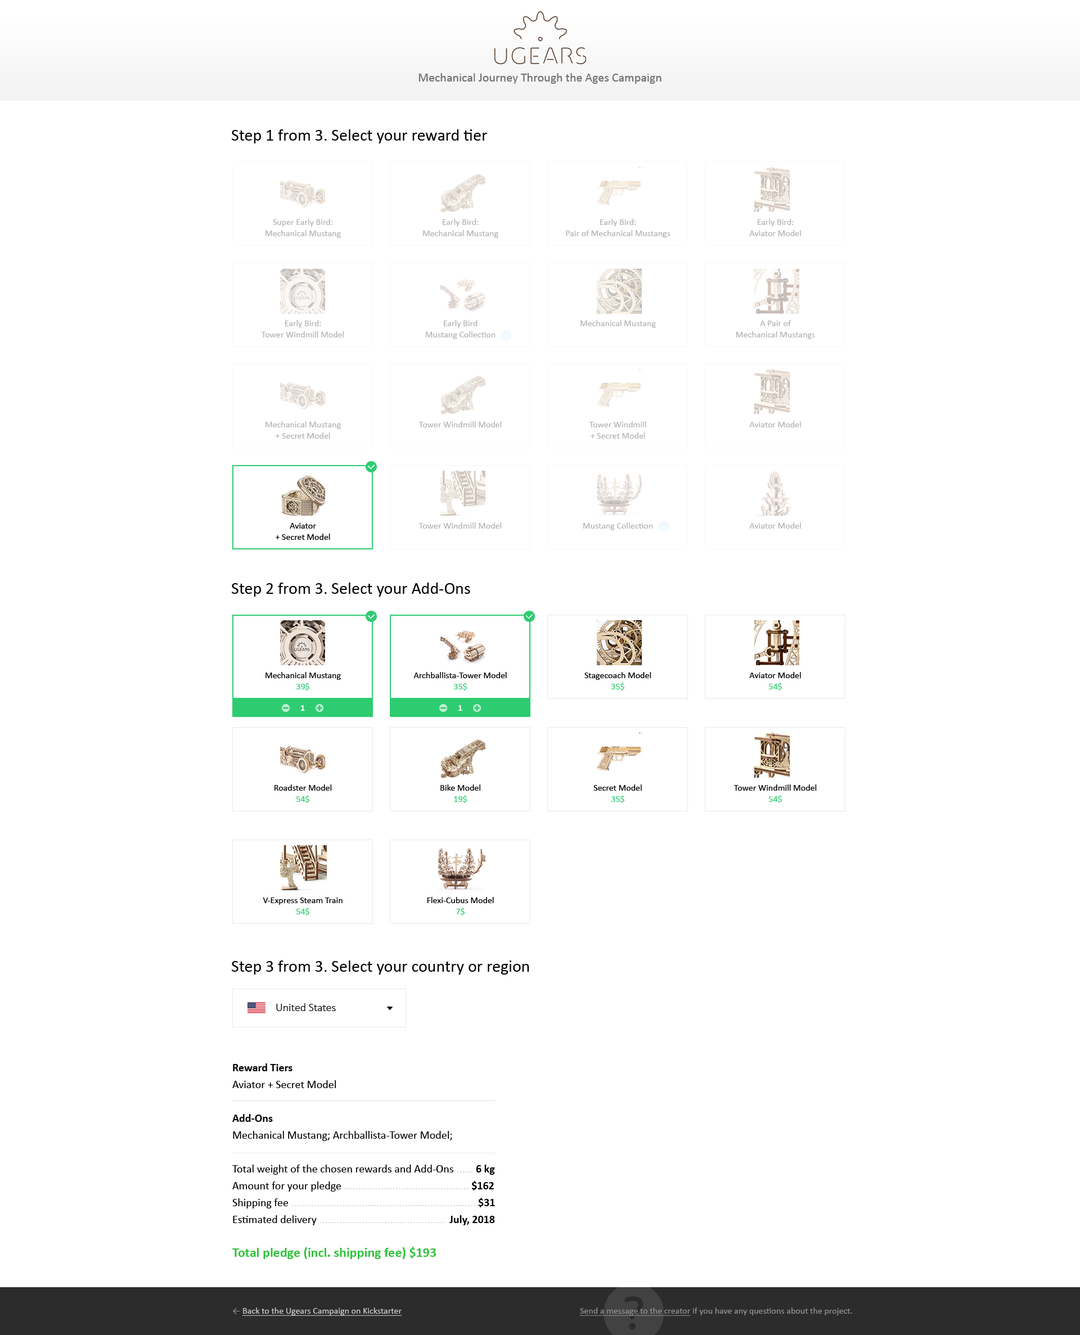
<style>
.page{position:relative;width:1080px;height:1335px;background:#ffffff}
.page>*{position:absolute;margin:0}
.t1{font:12.4px "Calibri";color:#707070}
.t2{font:16.9px "Calibri";color:#000000}
.t3{font:9px/11.2px "Calibri";color:#b3b3b3}
.t4{font:9px "Calibri";color:#b3b3b3}
.t5{font:9px/11.2px "Calibri";color:#000000}
.t6{font:9px/11.2px "Calibri";color:#2ecc71}
.t7{font:9px "Calibri-Bold";color:#ffffff}
.t8{font:11.2px "Calibri-Light";color:#000000}
.t9{font:11.2px/16.9px "Calibri";color:#000000}
.t10{font:11.2px/16.9px "Calibri-Bold";color:#000000}
.t11{font:11.2px/16.9px "Calibri";color:#cfcfcf}
.t12{font:13.5px/16.9px "Calibri-Bold";color:#2fc139}
.t13{font:9px "Calibri";color:#d1d1d1;text-decoration:underline}
.t14{font:9px "Calibri";color:#939393}
.t15{font:9px "Calibri";color:#939393;text-decoration:underline}
</style>
<div class="page">
<p class="t1" style="left:418px;top:73px;width:244px;height:11px">Mechanical Journey Through the Ages Campaign</p>
<p class="t2" style="left:232px;top:129px;width:255px;height:14px">Step 1 from 3. Select your reward tier</p>
<p class="t3" style="left:266px;top:219px;width:75px;height:19px;text-align:center">Super Early Bird:<br>Mechanical Mustang</p>
<p class="t3" style="left:423px;top:219px;width:75px;height:19px;text-align:center">Early Bird:<br>Mechanical Mustang</p>
<p class="t3" style="left:566px;top:219px;width:104px;height:19px;text-align:center">Early Bird:<br>Pair of Mechanical Mustangs</p>
<p class="t3" style="left:749px;top:219px;width:52px;height:17px;text-align:center">Early Bird:<br>Aviator Model</p>
<p class="t3" style="left:261px;top:320px;width:83px;height:18px;text-align:center">Early Bird:<br>Tower Windmill Model</p>
<p class="t3" style="left:426px;top:320px;width:70px;height:19px;text-align:center">Early Bird<br>Mustang Collection</p>
<p class="t4" style="left:580px;top:320px;width:76px;height:8px">Mechanical Mustang</p>
<p class="t3" style="left:736px;top:320px;width:79px;height:19px;text-align:center">A Pair of<br>Mechanical Mustangs</p>
<p class="t3" style="left:266px;top:421px;width:75px;height:18px;text-align:center">Mechanical Mustang<br>+ Secret Model</p>
<p class="t4" style="left:418px;top:421px;width:84px;height:7px">Tower Windmill Model</p>
<p class="t3" style="left:589px;top:421px;width:57px;height:18px;text-align:center">Tower Windmill<br>+ Secret Model</p>
<p class="t4" style="left:749px;top:421px;width:52px;height:7px">Aviator Model</p>
<p class="t5" style="left:276px;top:523px;width:54px;height:17px;text-align:center">Aviator<br>+ Secret Model</p>
<p class="t4" style="left:418px;top:523px;width:84px;height:6px">Tower Windmill Model</p>
<p class="t4" style="left:583px;top:523px;width:70px;height:7px">Mustang Collection</p>
<p class="t4" style="left:749px;top:523px;width:52px;height:6px">Aviator Model</p>
<p class="t2" style="left:232px;top:583px;width:238px;height:14px">Step 2 from 3. Select your Add-Ons</p>
<p class="t5" style="left:266px;top:672px;width:75px;height:19px;text-align:center">Mechanical Mustang<br><span class="t6">39$</span></p>
<p class="t5" style="left:413px;top:672px;width:94px;height:19px;text-align:center">Archballista-Tower Model<br><span class="t6">35$</span></p>
<p class="t5" style="left:584px;top:672px;width:67px;height:19px;text-align:center">Stagecoach Model<br><span class="t6">35$</span></p>
<p class="t5" style="left:749px;top:672px;width:52px;height:19px;text-align:center">Aviator Model<br><span class="t6">54$</span></p>
<p class="t7" style="left:301px;top:705px;width:4px;height:6px">1</p>
<p class="t7" style="left:458px;top:705px;width:4px;height:6px">1</p>
<p class="t5" style="left:274px;top:785px;width:58px;height:18px;text-align:center">Roadster Model<br><span class="t6">54$</span></p>
<p class="t5" style="left:440px;top:785px;width:40px;height:18px;text-align:center">Bike Model<br><span class="t6">19$</span></p>
<p class="t5" style="left:593px;top:785px;width:49px;height:18px;text-align:center">Secret Model<br><span class="t6">35$</span></p>
<p class="t5" style="left:734px;top:785px;width:83px;height:18px;text-align:center">Tower Windmill Model<br><span class="t6">54$</span></p>
<p class="t5" style="left:263px;top:898px;width:80px;height:18px;text-align:center">V-Express Steam Train<br><span class="t6">54$</span></p>
<p class="t5" style="left:427px;top:897px;width:67px;height:19px;text-align:center">Flexi-Cubus Model<br><span class="t6">7$</span></p>
<p class="t2" style="left:232px;top:961px;width:297px;height:14px">Step 3 from 3. Select your country or region</p>
<p class="t8" style="left:276px;top:1004px;width:60px;height:7px">United States</p>
<p class="t9" style="left:232px;top:1064px;width:263px;height:195px"><span class="t10">Reward Tiers<br></span>Aviator + Secret Model<br><br><span class="t10">Add-Ons<br></span>Mechanical Mustang; Archballista-Tower Model;<br><br>Total weight of the chosen rewards and Add-Ons <span class="t11">...... </span><span class="t10">6 kg<br></span>Amount for your pledge <span class="t11">............................................ </span><span class="t10">$162<br></span>Shipping fee <span class="t11">................................................................. </span><span class="t10">$31<br></span>Estimated delivery <span class="t11">............................................. </span><span class="t10">July, 2018<br><br></span><span class="t12">Total pledge (incl. shipping fee) $193</span></p>
<p class="t13" style="left:233px;top:1308px;width:169px;height:8px"><span class="t14">← </span>Baсk to the Ugears Campaign on Kickstarter</p>
<p class="t14" style="left:580px;top:1308px;width:272px;height:8px"><span class="t15">Send a message to the creator</span> if you have any questions about the project.</p>
</div>
